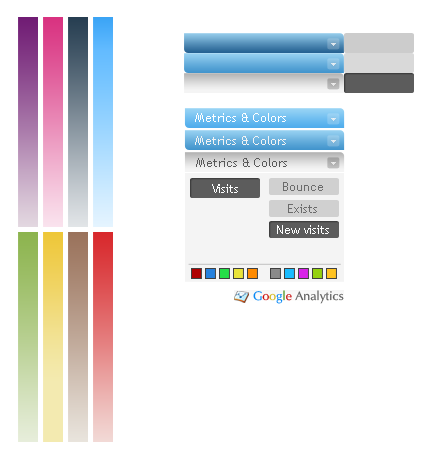
<style>
.page{position:relative;width:431px;height:459px;background:#ffffff}
.page>*{position:absolute;margin:0}
.t1{font:12px "TrebuchetMS";color:#ffffff}
.t2{font:12px "TrebuchetMS";color:#f3f3f3}
.t3{font:12px "TrebuchetMS";color:#595959}
.t4{font:12px "TrebuchetMS";color:#feffff}
.t5{font:12px "TrebuchetMS";color:#6b6b6b}
.t6{font:12.2px "Optima";color:#5c5c5c}
.t7{font:12.2px "Optima";color:#0687f5}
.t8{font:12.2px "Optima";color:#ca0909}
.t9{font:12.2px "Optima";color:#d2b514}
.t10{font:12.2px "Optima";color:#0587f6}
.t11{font:12.2px "Optima";color:#418c0e}
.t12{font:12.2px "Optima";color:#c71111}
</style>
<div class="page">
<p class="t1" style="left:195px;top:113px;width:91px;height:9px">Metrics &amp; Colors</p>
<p class="t2" style="left:195px;top:136px;width:91px;height:9px">Metrics &amp; Colors</p>
<p class="t3" style="left:196px;top:158px;width:91px;height:9px">Metrics &amp; Colors</p>
<p class="t4" style="left:212px;top:184px;width:26px;height:9px">Visits</p>
<p class="t5" style="left:283px;top:182px;width:40px;height:9px">Bounce</p>
<p class="t5" style="left:288px;top:204px;width:29px;height:9px">Exists</p>
<p class="t4" style="left:277px;top:225px;width:52px;height:9px">New visits</p>
<p class="t6" style="left:253px;top:290px;width:91px;height:14px"><span class="t7">G</span><span class="t8">o</span><span class="t9">o</span><span class="t10">g</span><span class="t11">l</span><span class="t12">e </span>Analytics</p>
</div>
